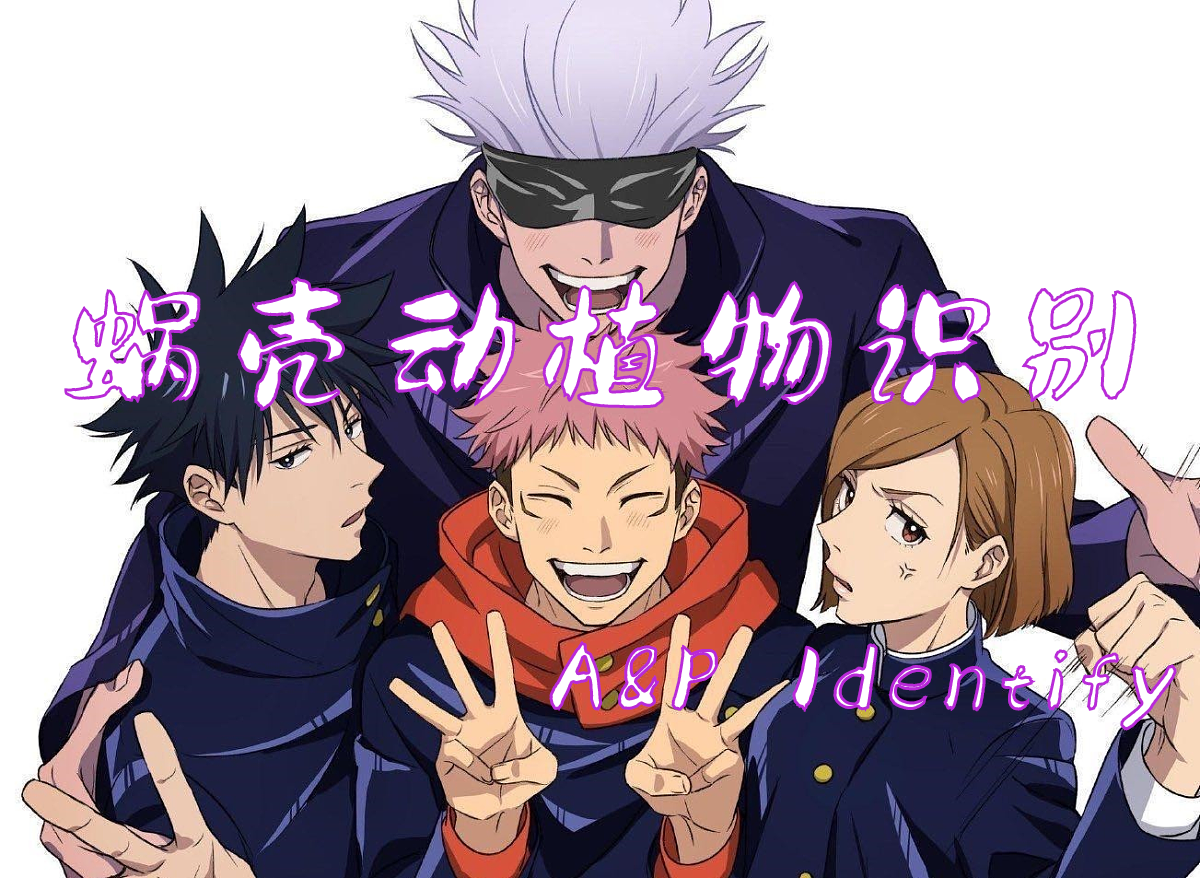
<style>
.page{position:relative;width:1200px;height:878px;background:#ffffff}
.page>*{position:absolute;margin:0}
.t1{font:133.5px "gongfanmianfeiti2.0";letter-spacing:0.05em;font-weight:bold;font-style:italic}
.t2{font:71.2px "gongfanmianfeiti2.0";letter-spacing:0.05em;font-weight:bold;font-style:italic}
</style>
<div class="page">
<p class="t1" style="left:64px;top:277px;width:1073px;height:134px">蜗壳动植物识别</p>
<p class="t2" style="left:549px;top:640px;width:628px;height:91px">A&amp;P Identify</p>
</div>
